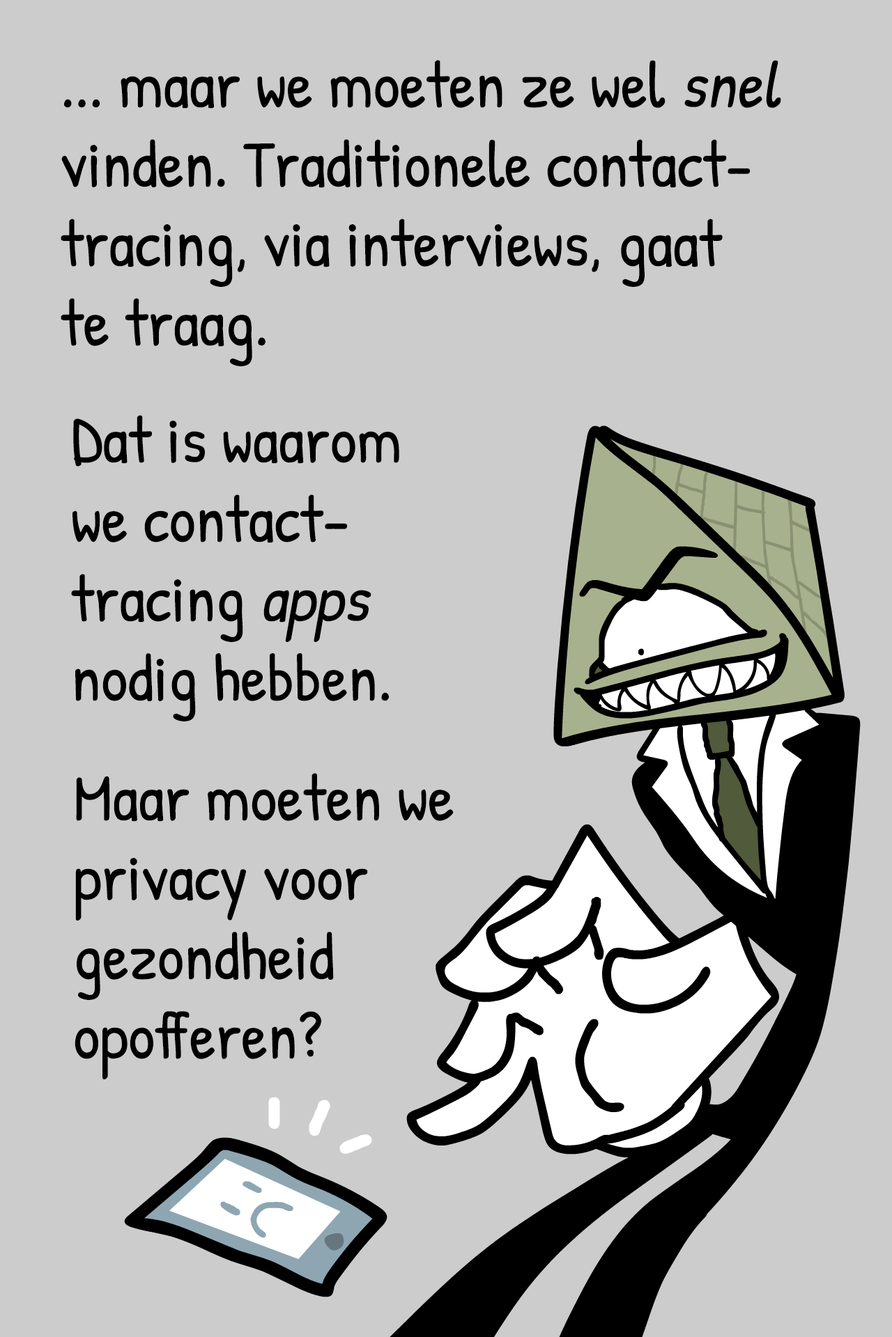
<style>
.page{position:relative;width:892px;height:1337px;background:#cccccc}
.page>*{position:absolute;margin:0}
.t1{font:66.2px "PatrickHand-Regular";color:#000000}
.t2{font:66.2px "PatrickHand-Regular";color:#000000;font-style:italic}
</style>
<div class="page">
<p class="t1" style="left:61px;top:60px;width:720px;height:306px">... maar we moeten ze wel <span class="t2">snel</span><br>vinden. Traditionele contact-<br>tracing, via interviews, gaat<br>te traag.</p>
<p class="t1" style="left:71px;top:415px;width:328px;height:307px">Dat is waarom<br>we contact-<br>tracing <span class="t2">apps<br></span>nodig hebben.</p>
<p class="t1" style="left:75px;top:773px;width:378px;height:307px">Maar moeten we<br>privacy voor<br>gezondheid<br>opofferen?</p>
</div>
